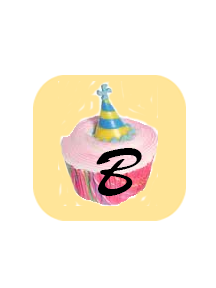
<style>
.page{position:relative;width:216px;height:288px;background:#ffffff}
.page>*{position:absolute;margin:0}
.t1{font:72px "BrushScriptMT";color:#000000}
</style>
<div class="page">
<p class="t1" style="left:96px;top:148px;width:46px;height:48px">B</p>
</div>
